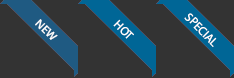
<style>
.page{position:relative;width:234px;height:78px;background:#333333}
.page>*{position:absolute;margin:0}
.t1{font:12px "MyriadPro-Regular";color:#ffffff;text-transform:uppercase}
.t2{font:11px "OpenSans-Semibold";color:#ffffff;text-transform:uppercase}
</style>
<div class="page">
<p class="t1" style="left:184px;top:13px;width:33px;height:34px;rotate:45deg">specıal</p>
<p class="t2" style="left:35px;top:19px;width:23px;height:21px;rotate:45deg">New</p>
<p class="t1" style="left:113px;top:19px;width:21px;height:20px;rotate:45deg">hot</p>
</div>
